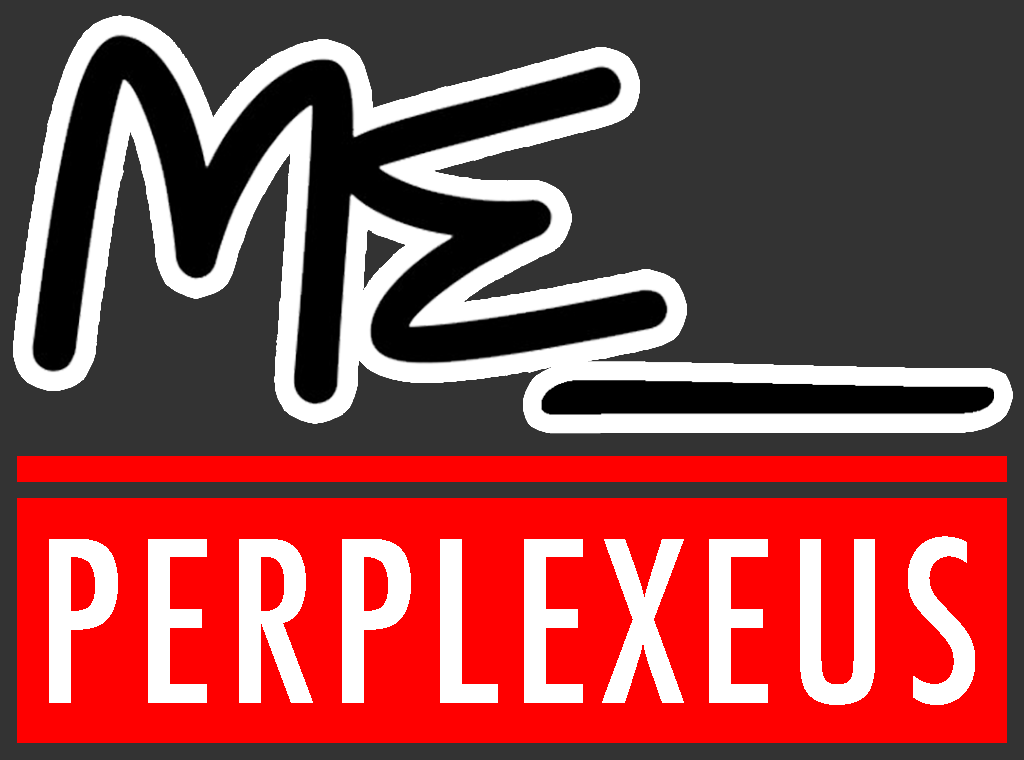
<style>
.page{position:relative;width:1024px;height:760px;background:#333333}
.page>*{position:absolute;margin:0}
.t1{font:218px "Futura-CondensedMedium";letter-spacing:0.054em;color:#ffffff}
</style>
<div class="page">
<p class="t1" style="left:49px;top:536px;width:926px;height:169px">PERPLEXEUS</p>
</div>
